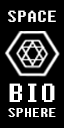
<style>
.page{position:relative;width:64px;height:128px;background:#000000}
.page>*{position:absolute;margin:0}
.t1{font:13px "Fixedsys";color:#ffffff}
.t2{font:16px "Fixedsys";color:#ffffff}
.t3{font:26px "Fixedsys";color:#ffffff}
</style>
<div class="page">
<p class="t1" style="left:8px;top:10px;width:48px;height:107px;text-align:center"><span class="t2">SPACE<br><br><br><br><br></span><span class="t3">BIO<br></span>SPHERE</p>
</div>
